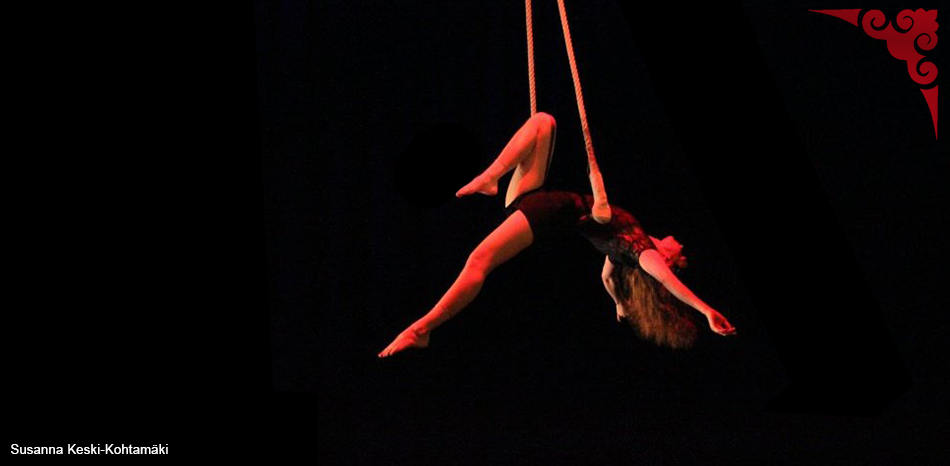
<style>
.page{position:relative;width:950px;height:466px;background:#000000}
.page>*{position:absolute;margin:0}
.t1{font:12.5px "ArialMT";letter-spacing:0.04em;color:#ffffff}
</style>
<div class="page">
<p class="t1" style="left:11px;top:444px;width:157px;height:10px">Susanna Keski-Kohtamäki</p>
</div>
